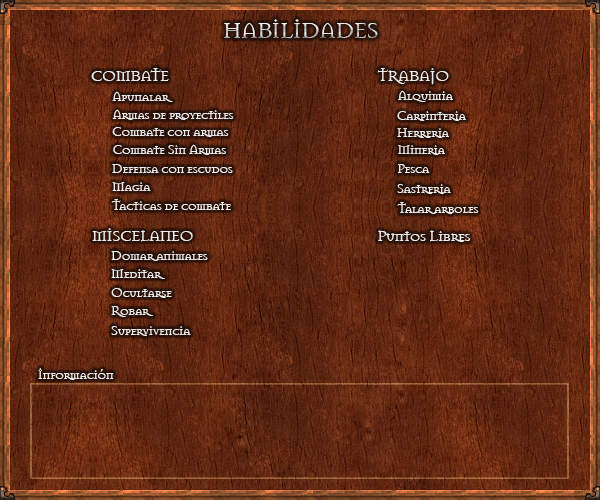
<style>
.page{position:relative;width:600px;height:500px}
.page>*{position:absolute;margin:0}
.t1{font:24px "Mason-Regular";letter-spacing:-0.06em}
.t2{font:16.5px "Mason-Regular";letter-spacing:-0.06em;color:#ececec}
.t3{font:14px "Mason-Regular";letter-spacing:-0.06em;color:#ececec}
</style>
<div class="page">
<p class="t1" style="left:224px;top:19px;width:154px;height:20px">HABILIDADES</p>
<p class="t2" style="left:91px;top:68px;width:78px;height:13px">COMBATE</p>
<p class="t2" style="left:377px;top:68px;width:72px;height:17px">TRABAJO</p>
<p class="t3" style="left:112px;top:91px;width:61px;height:11px">Apunalar</p>
<p class="t3" style="left:398px;top:90px;width:55px;height:12px">Alquimia</p>
<p class="t3" style="left:112px;top:109px;width:122px;height:11px">Armas de proyectiles</p>
<p class="t3" style="left:397px;top:111px;width:69px;height:10px">Carpinteria</p>
<p class="t3" style="left:112px;top:127px;width:117px;height:10px">Combate con armas</p>
<p class="t3" style="left:397px;top:128px;width:52px;height:10px">Herreria</p>
<p class="t3" style="left:113px;top:144px;width:113px;height:11px">Combate Sin Armas</p>
<p class="t3" style="left:398px;top:145px;width:47px;height:10px">Mineria</p>
<p class="t3" style="left:112px;top:164px;width:121px;height:9px">Defensa con escudos</p>
<p class="t3" style="left:398px;top:164px;width:32px;height:9px">Pesca</p>
<p class="t3" style="left:112px;top:182px;width:39px;height:9px">Magia</p>
<p class="t3" style="left:397px;top:184px;width:54px;height:10px">Sastreria</p>
<p class="t3" style="left:111px;top:199px;width:120px;height:11px">Tacticas de combate</p>
<p class="t3" style="left:397px;top:202px;width:82px;height:12px">Talar arboles</p>
<p class="t2" style="left:92px;top:228px;width:101px;height:14px">MISCELANEO</p>
<p class="t2" style="left:378px;top:230px;width:93px;height:12px">Puntos Libres</p>
<p class="t3" style="left:111px;top:251px;width:97px;height:10px">Domar animales</p>
<p class="t3" style="left:111px;top:269px;width:54px;height:10px">Meditar</p>
<p class="t3" style="left:111px;top:288px;width:61px;height:10px">Ocultarse</p>
<p class="t3" style="left:111px;top:306px;width:42px;height:11px">Robar</p>
<p class="t3" style="left:111px;top:326px;width:80px;height:10px">Supervivencia</p>
<p class="t3" style="left:38px;top:368px;width:76px;height:12px">Información</p>
</div>
